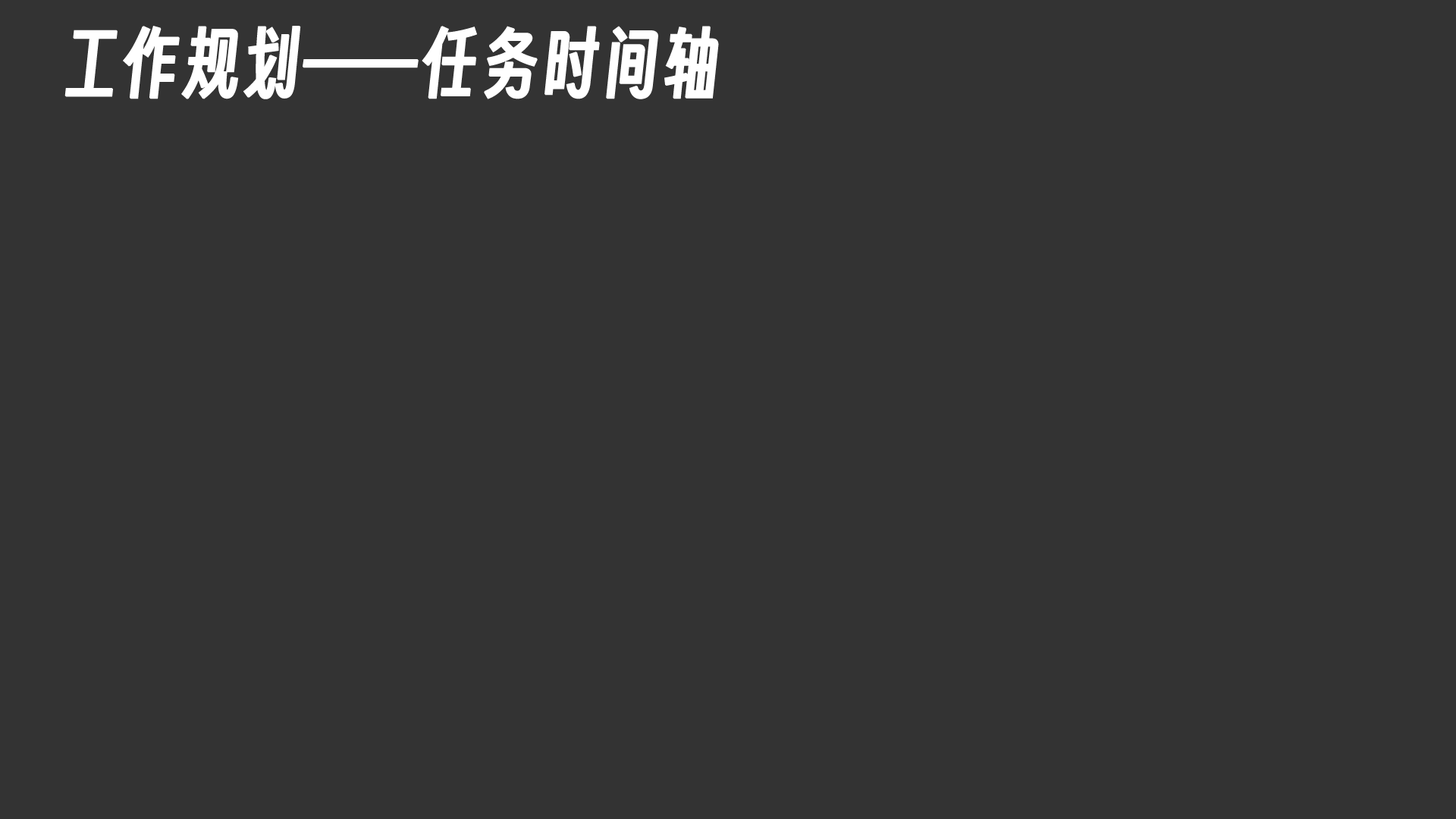
<style>
.page{position:relative;width:1456px;height:819px;background:#333333}
.page>*{position:absolute;margin:0}
.t1{font:72.8px "SmileySans-Oblique";color:#ffffff;font-weight:bold}
</style>
<div class="page">
<p class="t1" style="left:64px;top:26px;width:655px;height:73px">工作规划——任务时间轴</p>
</div>
